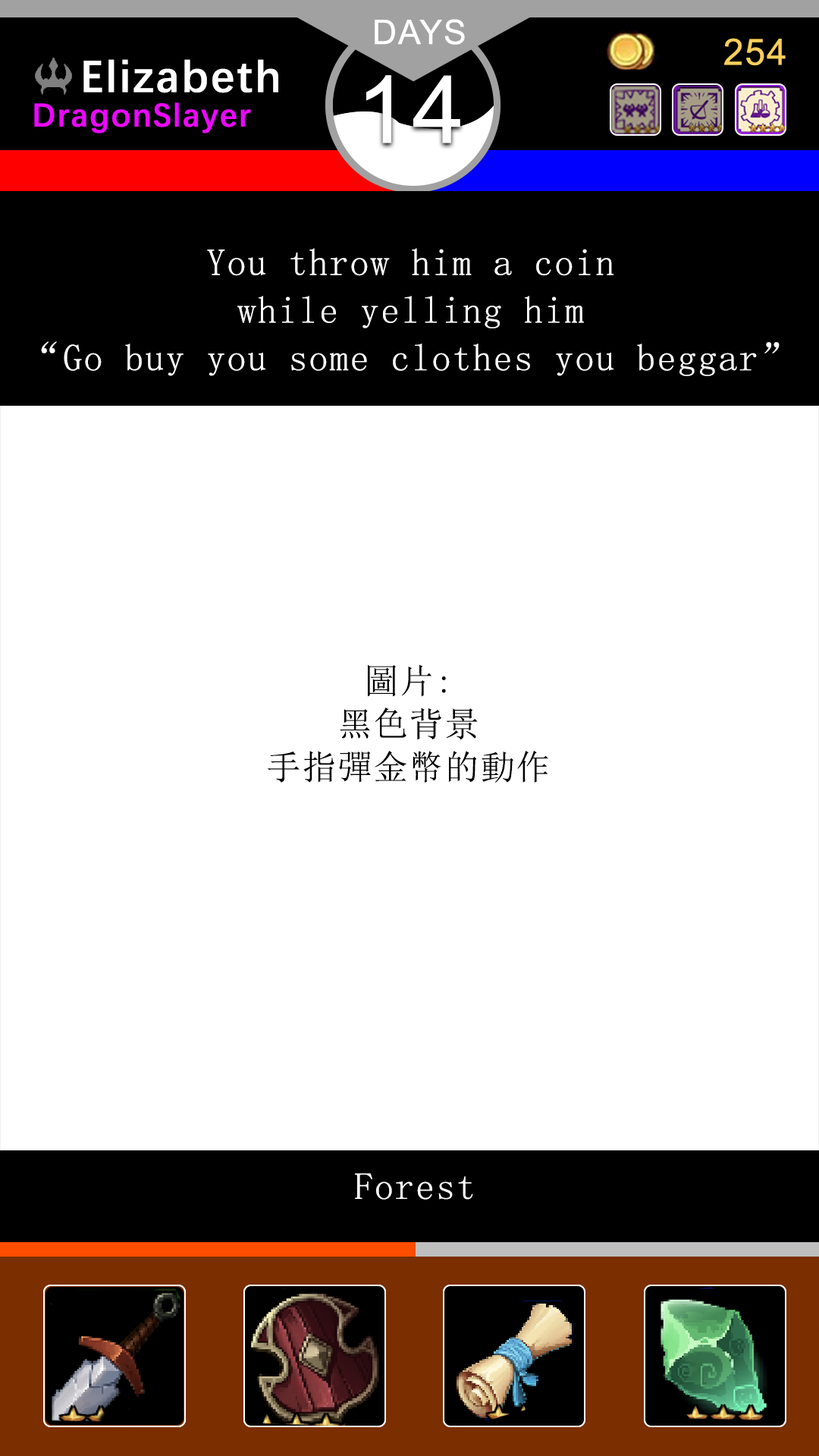
<style>
.page{position:relative;width:819px;height:1456px;background:#ffffff}
.page>*{position:absolute;margin:0}
.t1{font:37.9px/47.6px "SimSun";letter-spacing:0.04em;color:#ffffff}
.t2{font:34.3px/43.1px "SimSun";letter-spacing:0.04em;color:#000000}
.t3{font:37.9px "SimSun";letter-spacing:0.04em;color:#ffffff}
</style>
<div class="page">
<p class="t1" style="left:41px;top:248px;width:739px;height:128px;text-align:center">You throw him a coin <br>while yelling him <br>“Go buy you some clothes you beggar”</p>
<p class="t2" style="left:268px;top:664px;width:280px;height:119px;text-align:center">圖片:<br>黑色背景<br>手指彈金幣的動作</p>
<p class="t3" style="left:355px;top:1173px;width:118px;height:27px">Forest</p>
</div>
